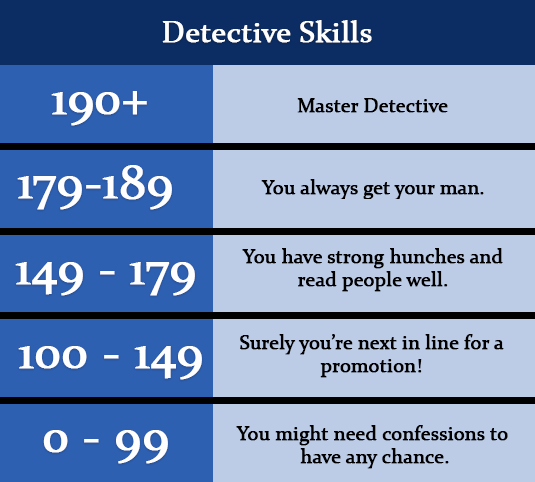
<style>
.page{position:relative;width:535px;height:482px;background:#bccce6}
.page>*{position:absolute;margin:0}
.t1{font:30px "Constantia";color:#fefefe;font-weight:bold}
.t2{font:48px "Constantia";color:#fefefe;font-weight:bold}
.t3{font:19.6px "Constantia";color:#000000;font-weight:bold}
</style>
<div class="page">
<p class="t1" style="left:162px;top:20px;width:210px;height:23px">Detective Skills</p>
<p class="t2" style="left:51px;top:91px;width:96px;height:35px">190+</p>
<p class="t3" style="left:297px;top:98px;width:151px;height:15px">Master Detective</p>
<p class="t2" style="left:17px;top:165px;width:155px;height:45px">179-189</p>
<p class="t3" style="left:261px;top:179px;width:223px;height:20px">You always get your man.</p>
<p class="t3" style="left:242px;top:248px;width:261px;height:44px;text-align:center">You have strong hunches and<br>read people well.</p>
<p class="t2" style="left:15px;top:262px;width:180px;height:34px">149 - 179</p>
<p class="t3" style="left:240px;top:334px;width:264px;height:44px;text-align:center">Surely you’re next in line for a <br>promotion!</p>
<p class="t2" style="left:18px;top:346px;width:184px;height:34px">100 - 149</p>
<p class="t3" style="left:236px;top:425px;width:272px;height:44px;text-align:center">You might need confessions to <br>have any chance.</p>
<p class="t2" style="left:43px;top:430px;width:125px;height:34px">0 - 99</p>
</div>
